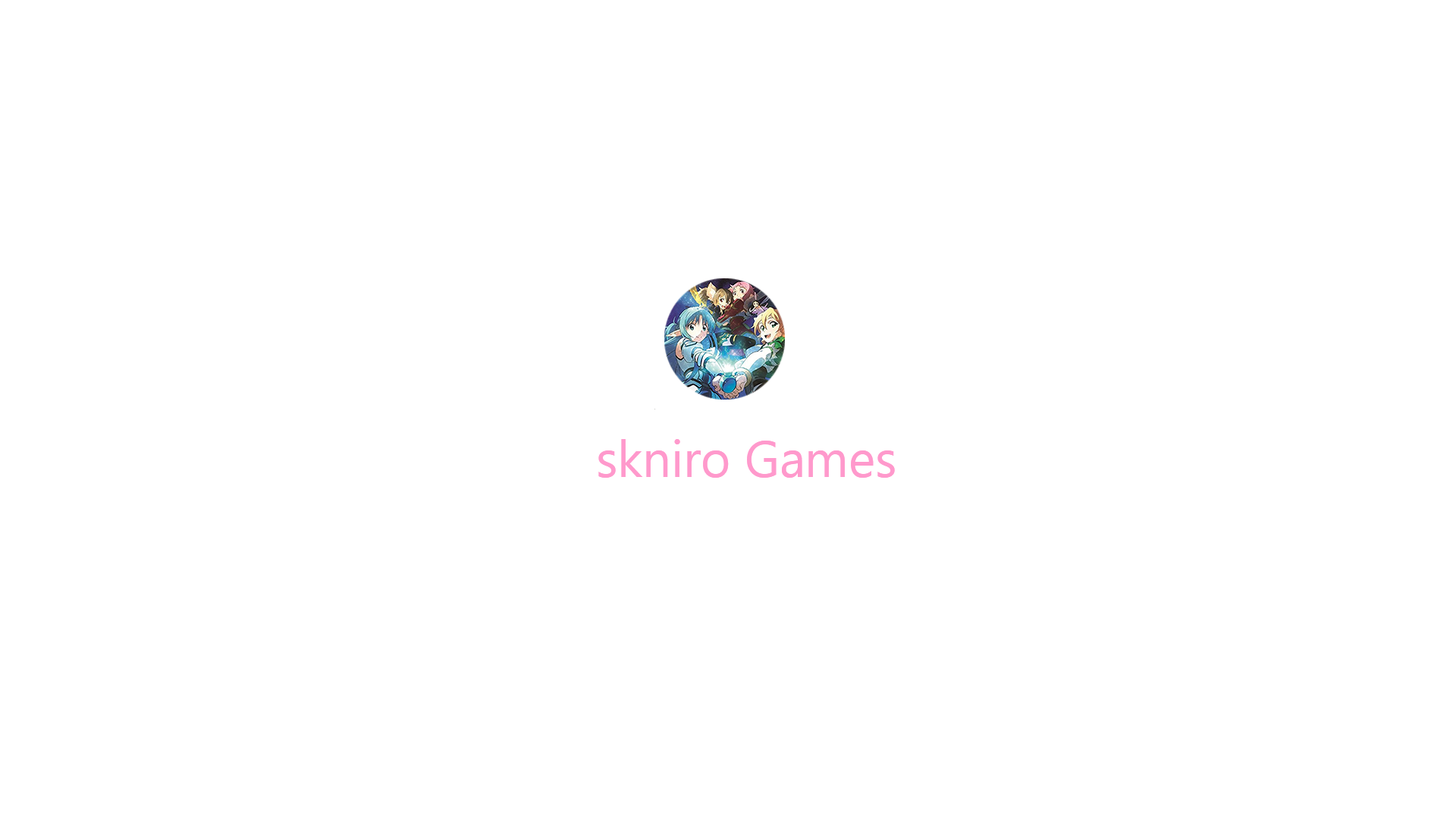
<style>
.page{position:relative;width:1456px;height:819px;background:#ffffff}
.page>*{position:absolute;margin:0}
.t1{font:50.6px "MyanmarText";color:#ff99cc}
</style>
<div class="page">
<p class="t1" style="left:598px;top:439px;width:297px;height:39px">skniro Games</p>
</div>
